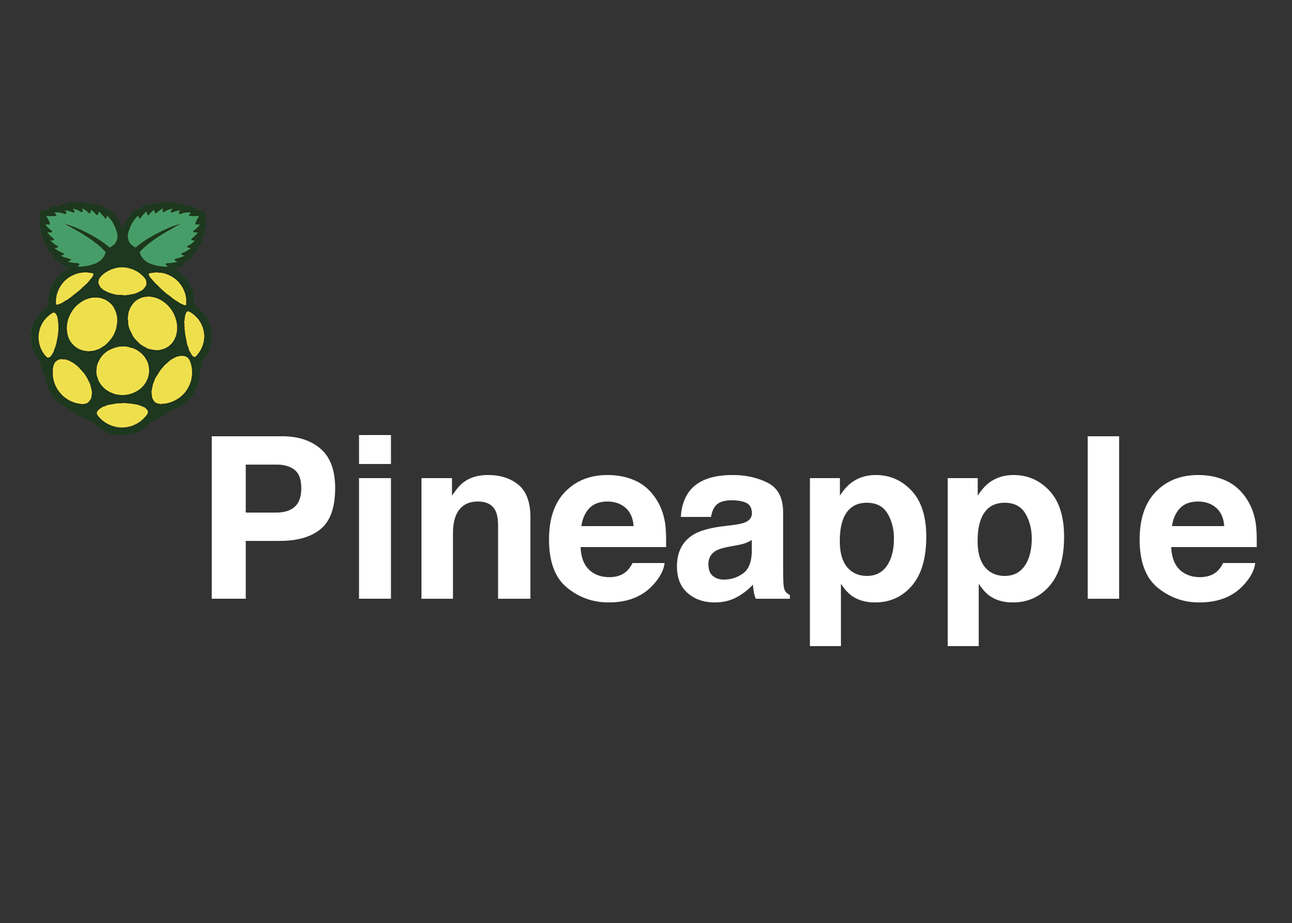
<style>
.page{position:relative;width:1292px;height:923px;background:#333333}
.page>*{position:absolute;margin:0}
.t1{font:226.1px "Helvetica-Bold";color:#ffffff}
</style>
<div class="page">
<p class="t1" style="left:212px;top:435px;width:1045px;height:211px">Pineapple</p>
</div>
